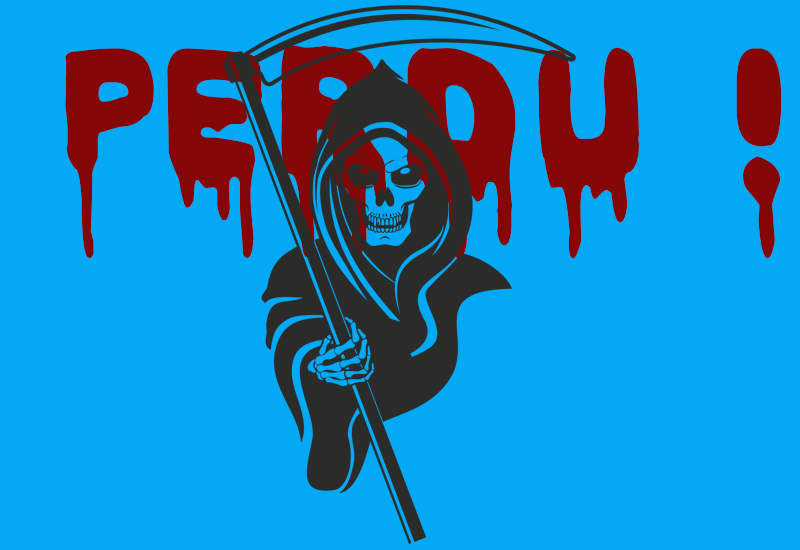
<style>
.page{position:relative;width:800px;height:550px;background:#03a9f4}
.page>*{position:absolute;margin:0}
.t1{font:300px "DoctorSatan";color:#850606}
</style>
<div class="page">
<p class="t1" style="left:65px;top:45px;width:717px;height:213px">perdu !</p>
</div>
